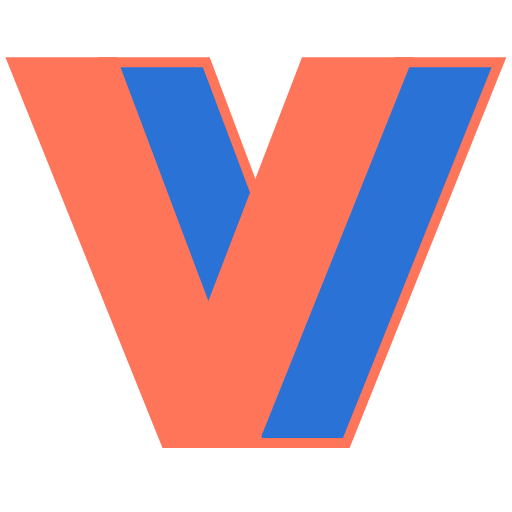
<style>
.page{position:relative;width:512px;height:512px;background:#ffffff}
.page>*{position:absolute;margin:0}
.t1{font:800px "nevis-Bold";letter-spacing:-0.053em;color:#ff7559}
.t2{font:800px "nevis-Bold";letter-spacing:-0.053em}
</style>
<div class="page">
<p class="t1" style="left:5px;top:57px;width:409px;height:391px">v</p>
<p class="t2" style="left:98px;top:57px;width:409px;height:391px">v</p>
</div>
